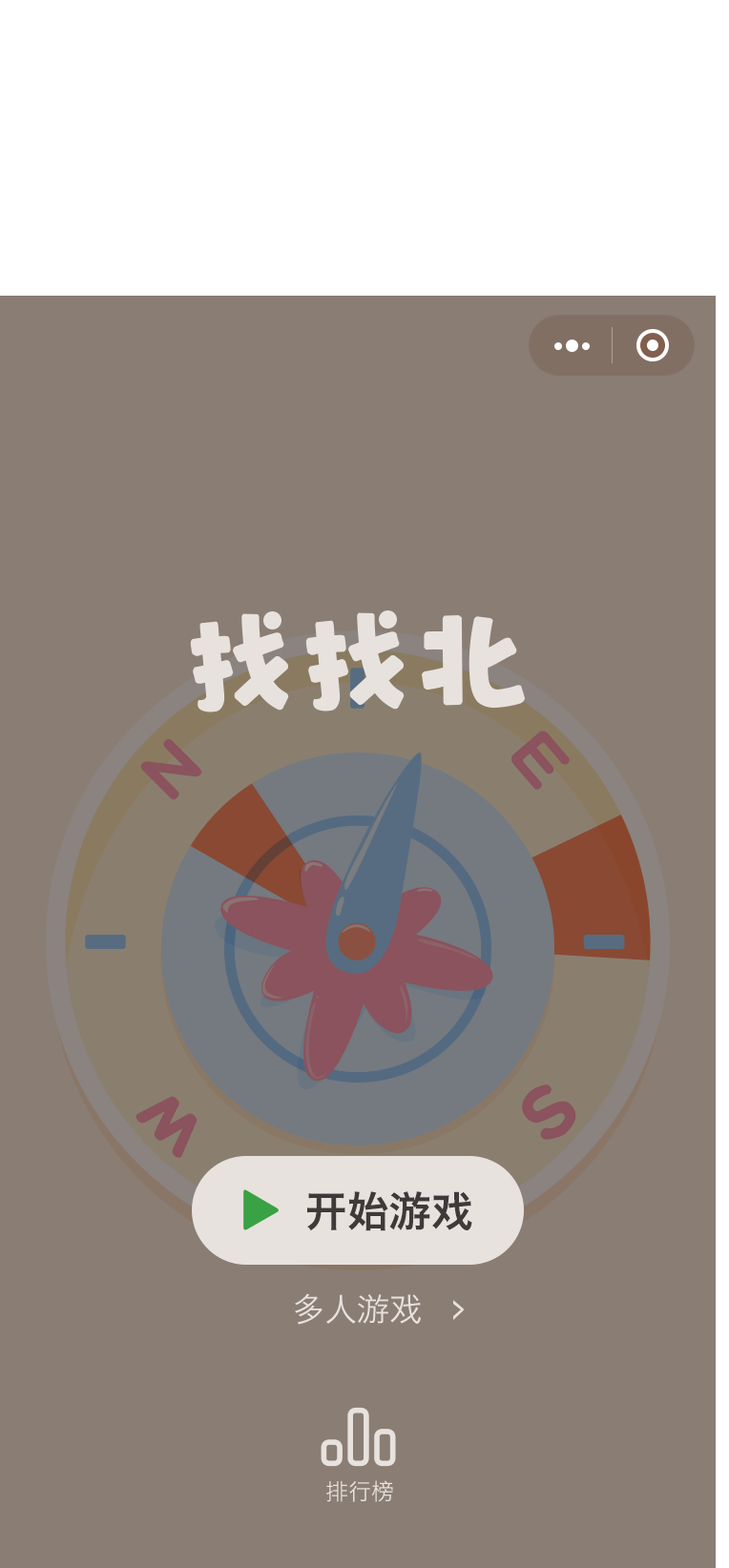
<style>
.page{position:relative;width:729px;height:1568px;background:#8a7d74}
.page>*{position:absolute;margin:0}
.t1{font:42px "HiraginoSansGB-W6";color:#3e3a3a}
.t2{font:32.4px "HiraginoSansGB-W3";color:#e8e2de}
.t3{font:22.9px "HiraginoSansGB-W3";color:#e8e2de}
</style>
<div class="page">
<p class="t1" style="left:307px;top:1191px;width:165px;height:40px">开始游戏</p>
<p class="t2" style="left:295px;top:1293px;width:126px;height:32px">多人游戏</p>
<p class="t3" style="left:326px;top:1480px;width:67px;height:22px">排行榜</p>
</div>
